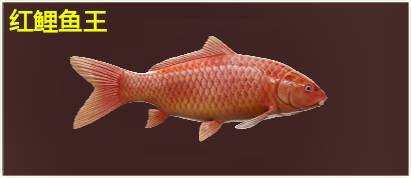
<style>
.page{position:relative;width:411px;height:178px}
.page>*{position:absolute;margin:0}
.t1{font:24px "MicrosoftYaHeiUI";color:#f4ff00;font-weight:bold}
</style>
<div class="page">
<p class="t1" style="left:9px;top:9px;width:98px;height:24px">红鲤鱼王</p>
</div>
